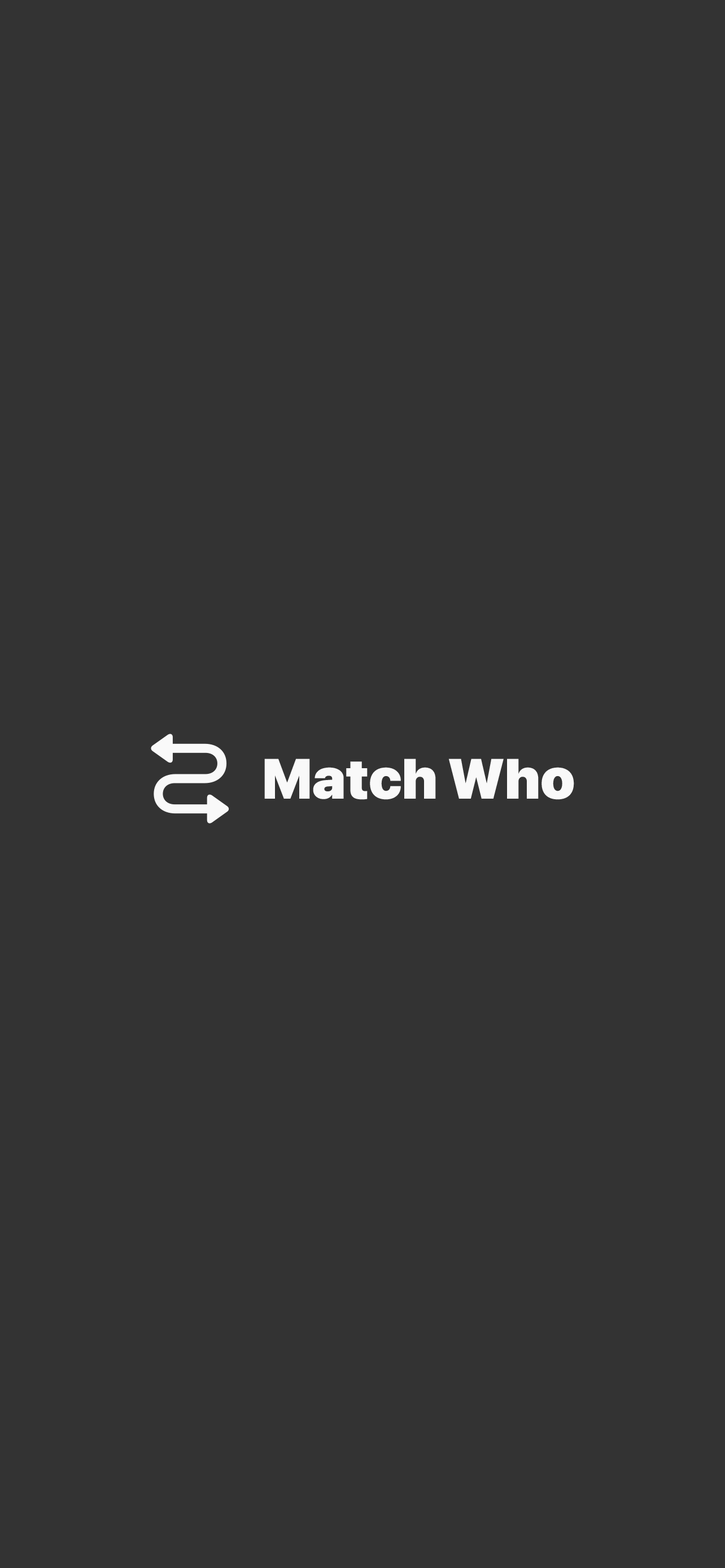
<style>
.page{position:relative;width:725px;height:1568px;background:#333333}
.page>*{position:absolute;margin:0}
.t1{font:56.4px "SFProDisplay-Black";color:#f9f9f9}
</style>
<div class="page">
<p class="t1" style="left:264px;top:759px;width:310px;height:41px">Match Who</p>
</div>
